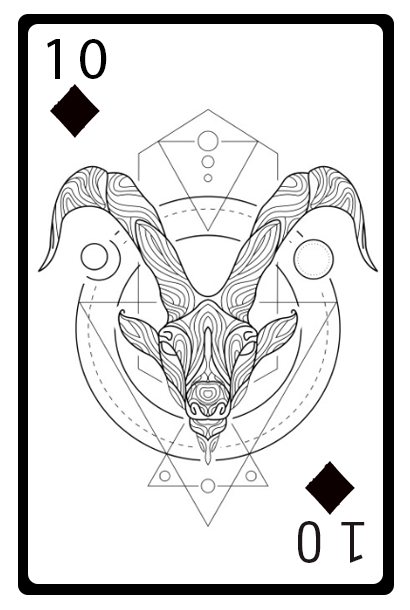
<style>
.page{position:relative;width:410px;height:610px;background:#ffffff}
.page>*{position:absolute;margin:0}
.t1{font:60px "MyriadPro-Regular";letter-spacing:0.1em;color:#000000}
.t2{font:60.3px "OratorStd";letter-spacing:0.1em;color:#1d1616}
</style>
<div class="page">
<p class="t1" style="left:47px;top:39px;width:60px;height:40px">10</p>
<p class="t2" style="left:298px;top:521px;width:67px;height:42px;rotate:180deg">10</p>
</div>
